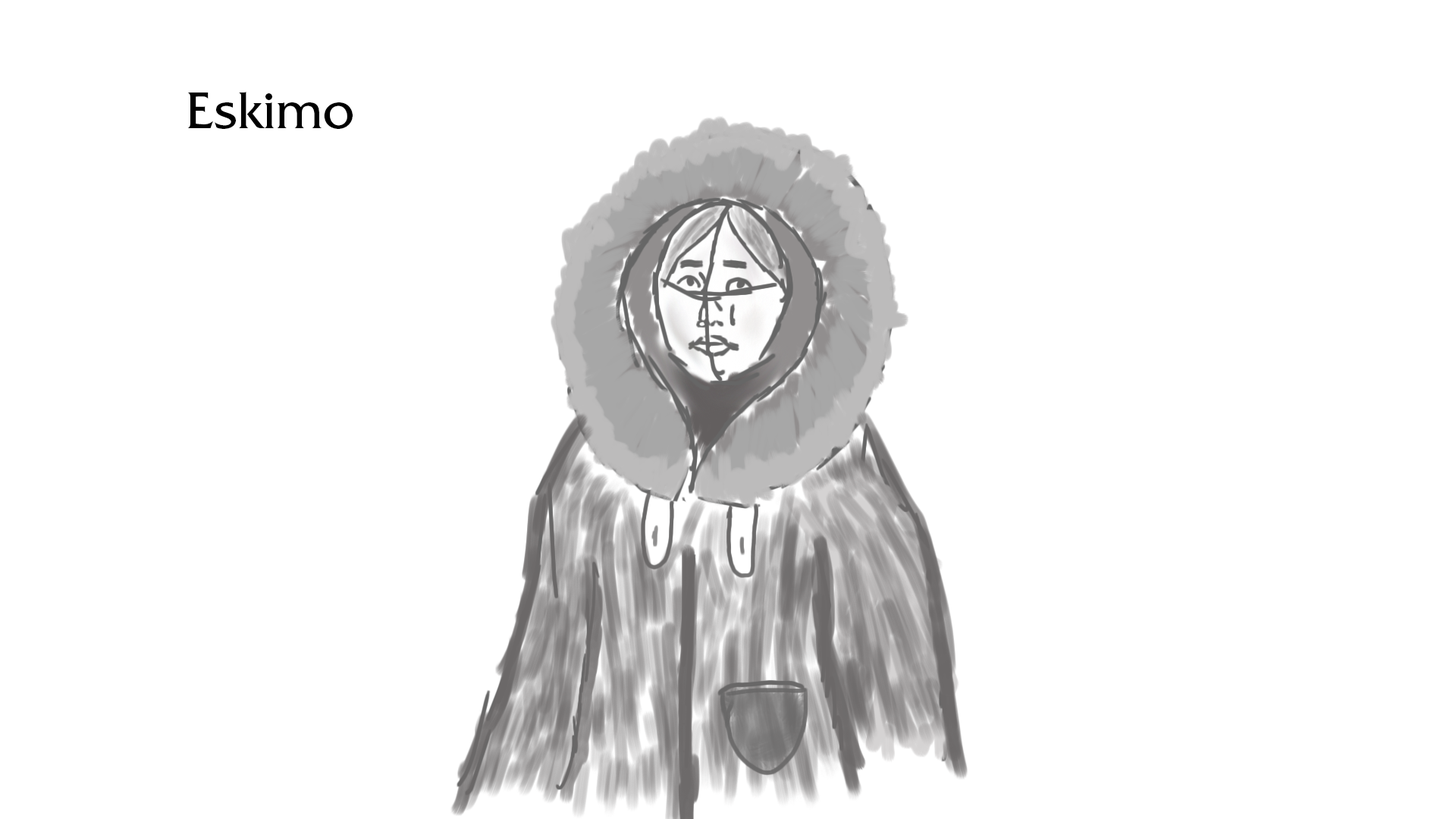
<style>
.page{position:relative;width:1456px;height:819px;background:#ffffff}
.page>*{position:absolute;margin:0}
.t1{font:54.6px "FrizQuadrataStd";color:#000000}
</style>
<div class="page">
<p class="t1" style="left:187px;top:92px;width:166px;height:37px">Eskimo</p>
</div>
